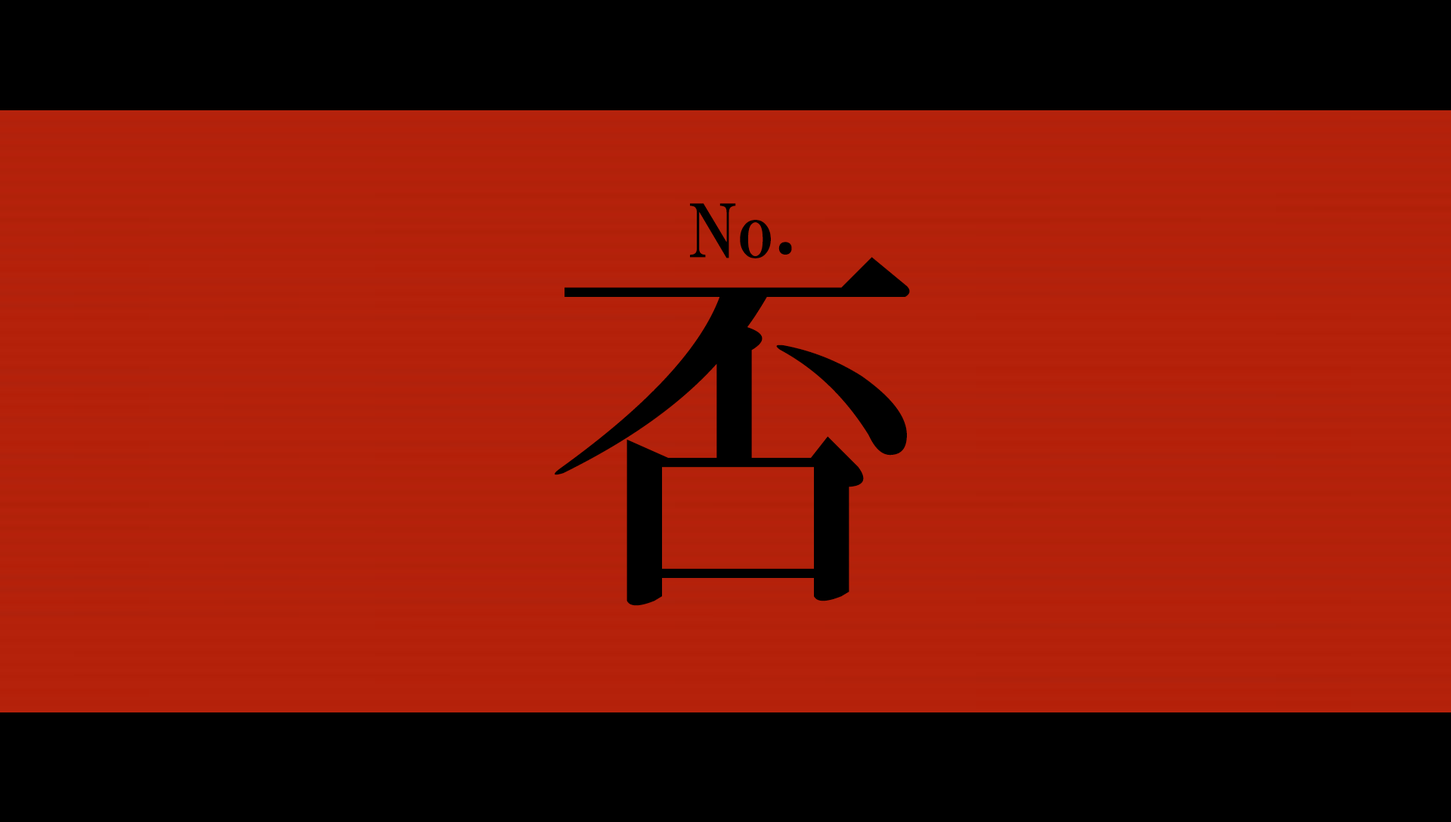
<style>
.page{position:relative;width:1451px;height:822px;background:#000000}
.page>*{position:absolute;margin:0}
.t1{font:72.5px "HGPMinchoE";letter-spacing:0.025em;color:#000000}
.t2{font:389.1px "HGMinchoB";letter-spacing:0.29em;color:#000000}
</style>
<div class="page">
<p class="t1" style="left:690px;top:203px;width:102px;height:55px">No.</p>
<p class="t2" style="left:555px;top:257px;width:355px;height:349px">否</p>
</div>
